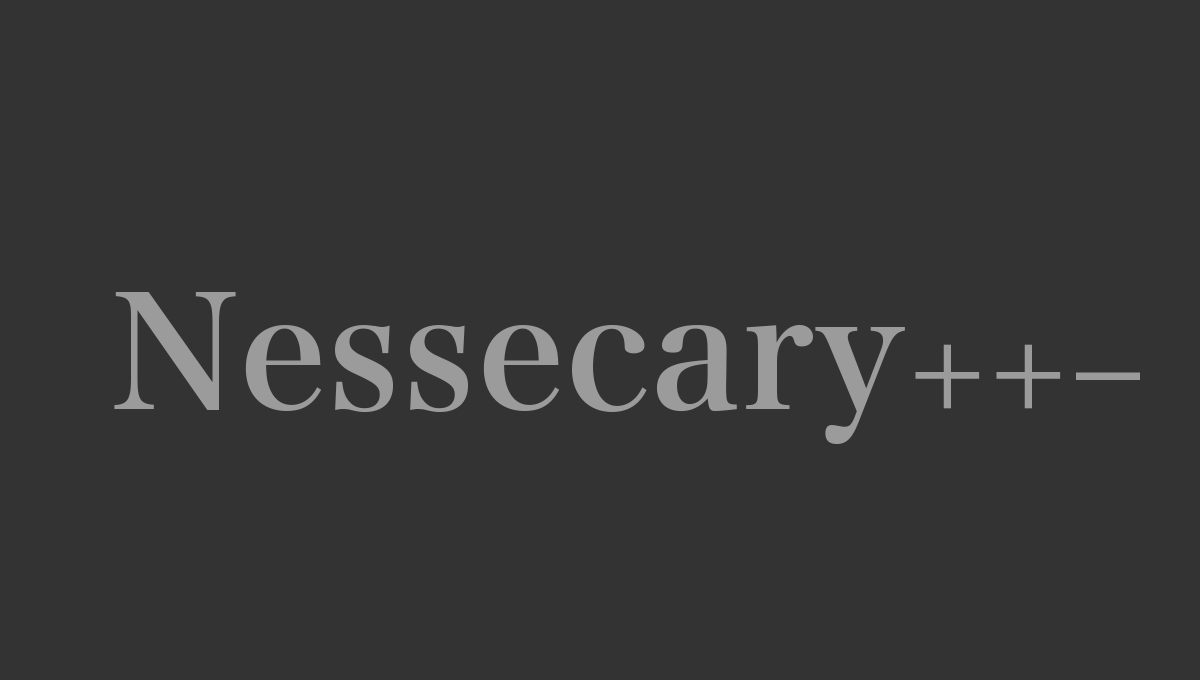
<style>
.page{position:relative;width:1200px;height:680px;background:#333333}
.page>*{position:absolute;margin:0}
.t1{font:156.2px "HiraMinProN-W6";letter-spacing:0.005em;color:#9b9b9b}
.t2{font:78.2px "HiraMinProN-W6";color:#9b9b9b}
.t3{font:117.2px "HiraMinProN-W6";letter-spacing:0.005em;color:#9b9b9b}
.t4{font:117.2px "KozGoPr6N-Regular";letter-spacing:0.005em;color:#9b9b9b;scale:2 1}
</style>
<div class="page">
<p class="t1" style="left:114px;top:292px;width:1026px;height:152px"><span class="t2"><br><br></span>Nessecary<span class="t3">++</span><span class="t4">-</span></p>
</div>
